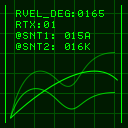
<style>
.page{position:relative;width:128px;height:128px;background:#001a00}
.page>*{position:absolute;margin:0}
.t1{font:9px "Terminal";letter-spacing:0.1em;color:#00ff00}
</style>
<div class="page">
<p class="t1" style="left:16px;top:10px;width:88px;height:40px">RVEL_DEG:0165<br>RTX:01<br>@SNT1: 015A<br>@SNT2: 016K</p>
</div>
